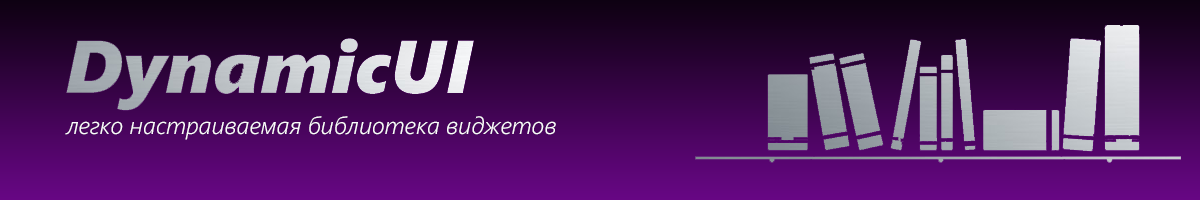
<style>
.page{position:relative;width:1200px;height:200px}
.page>*{position:absolute;margin:0}
.t1{font:24px "SegoeUI-SemilightItalic";color:#fcfbfc}
</style>
<div class="page">
<p class="t1" style="left:65px;top:116px;width:491px;height:24px">легко настраиваемая библиотека виджетов</p>
</div>
